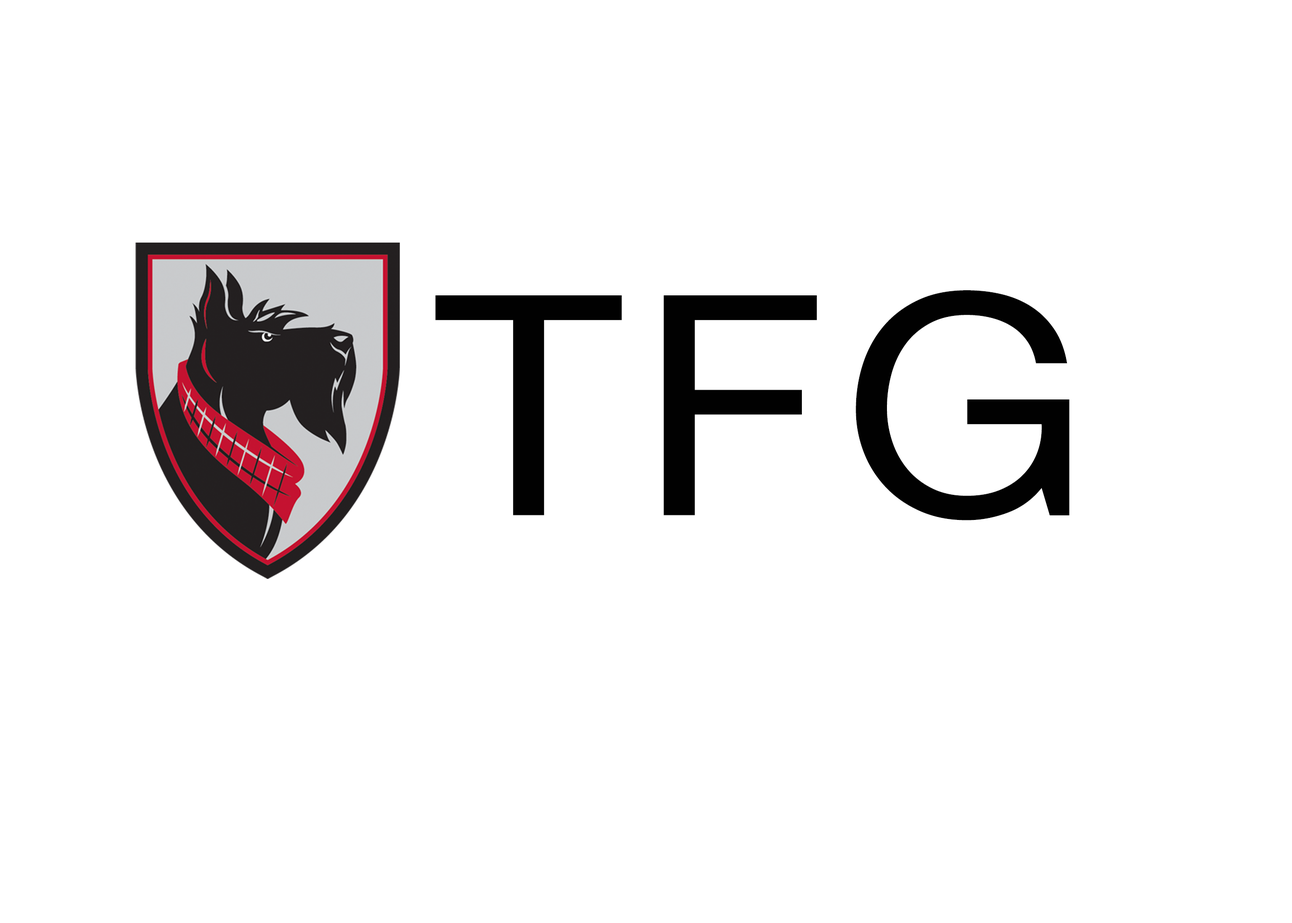
<style>
.page{position:relative;width:1292px;height:923px;background:#ffffff}
.page>*{position:absolute;margin:0}
.t1{font:307.6px "HelveticaNeue";letter-spacing:0.05em;color:#010101;scale:1.06 1}
</style>
<div class="page">
<p class="t1" style="left:435px;top:290px;width:635px;height:230px">TFG</p>
</div>
